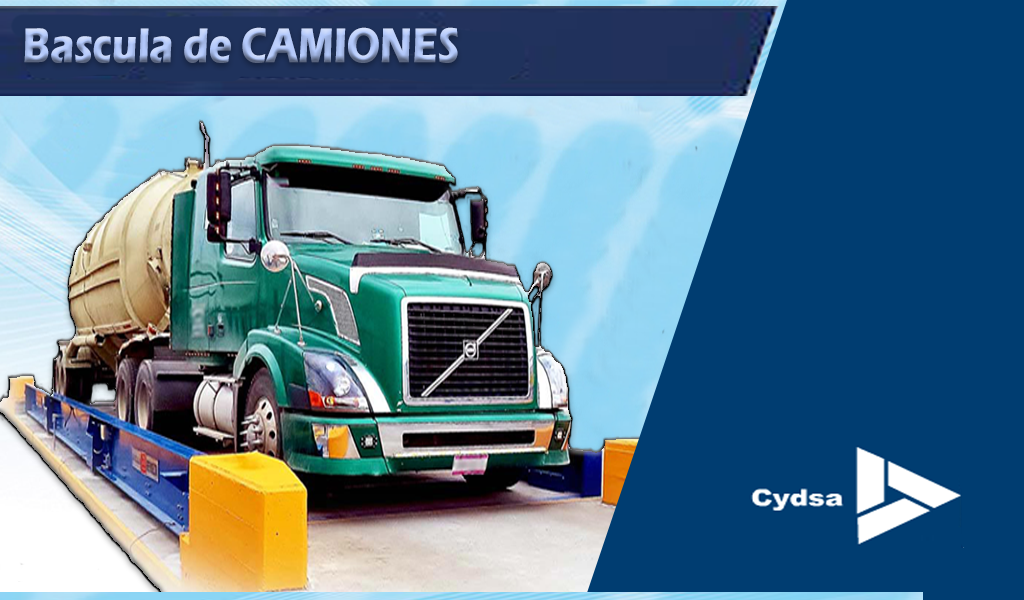
<style>
.page{position:relative;width:1024px;height:600px;background:#003d71}
.page>*{position:absolute;margin:0}
.t1{font:50.8px "ErasITC-Bold";scale:0.76 1}
</style>
<div class="page">
<p class="t1" style="left:24px;top:27px;width:434px;height:36px">Bascula de CAMIONES</p>
</div>
